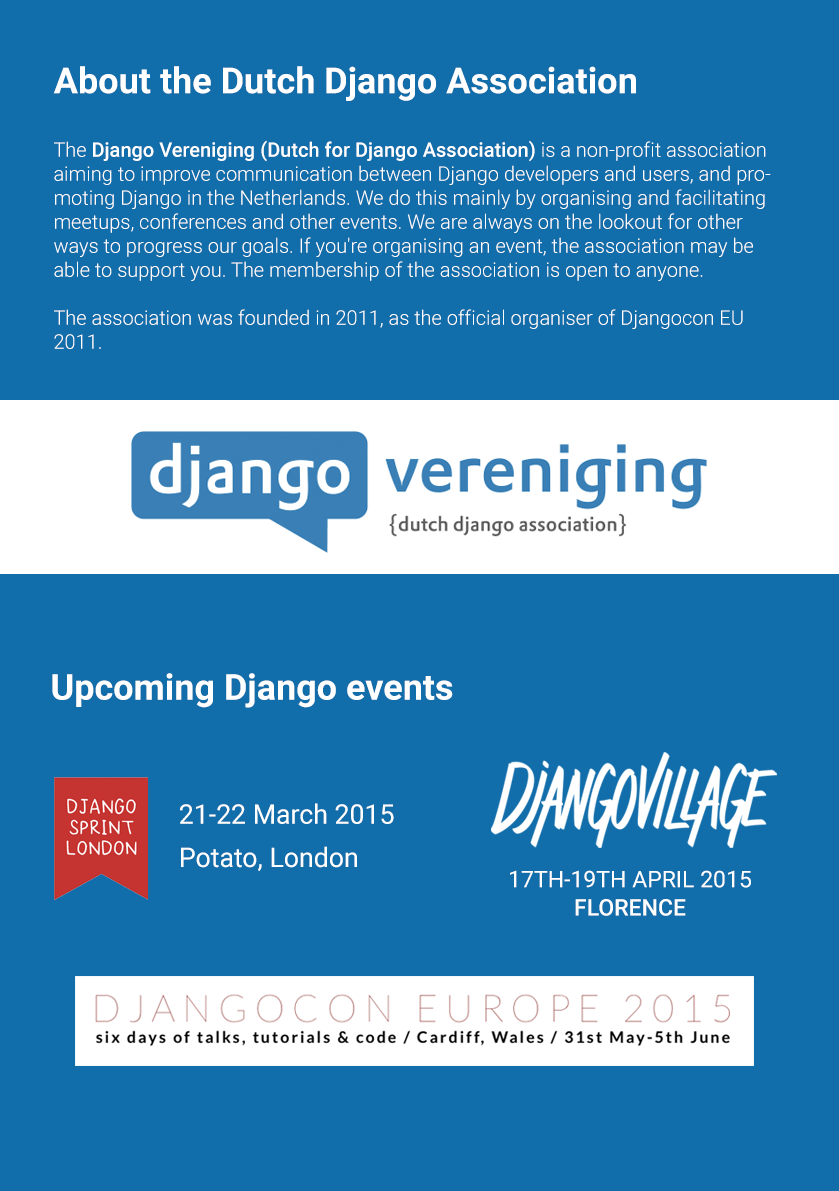
<style>
.page{position:relative;width:839px;height:1191px;background:#126eaa}
.page>*{position:absolute;margin:0}
.t1{font:36px "Roboto-Bold";color:#ffffff}
.t2{font:20px "Roboto-Light";color:#ffffff}
.t3{font:20px "Roboto-Medium";color:#ffffff}
.t4{font:27px/43.2px "Roboto-Regular";color:#ffffff}
.t5{font:23px/28.2px "Roboto-Regular";color:#ffffff;text-transform:uppercase}
.t6{font:23px/28.2px "Roboto-Medium";color:#ffffff;text-transform:uppercase}
</style>
<div class="page">
<p class="t1" style="left:53px;top:66px;width:583px;height:35px">About the Dutch Django Association</p>
<p class="t2" style="left:54px;top:140px;width:717px;height:209px">The <span class="t3">Django Vereniging (Dutch for Django Association) </span>is a non-profit association aiming to improve communication between Django developers and users, and promoting Django in the Netherlands. We do this mainly by organising and facilitating meetups, conferences and other events. We are always on the lookout for other ways to progress our goals. If you're organising an event, the association may be able to support you. The membership of the association is open to anyone.<br><br>The association was founded in 2011, as the official organiser of Djangocon EU 2011.</p>
<p class="t1" style="left:52px;top:673px;width:401px;height:35px">Upcoming Django events</p>
<p class="t4" style="left:180px;top:803px;width:214px;height:68px">21-22 March 2015<br>Potato, London</p>
<p class="t5" style="left:510px;top:870px;width:241px;height:46px;text-align:center">17th-19th April 2015<br><span class="t6">Florence</span></p>
</div>
